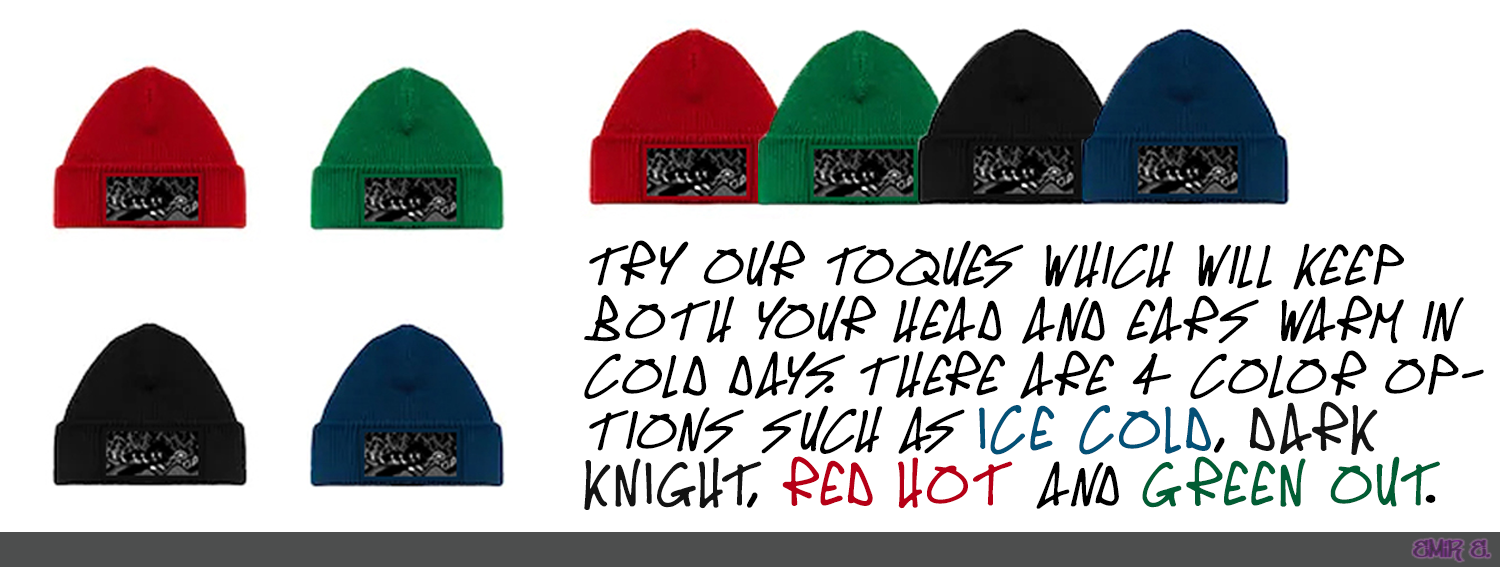
<style>
.page{position:relative;width:1500px;height:567px;background:#ffffff}
.page>*{position:absolute;margin:0}
.t1{font:43px/55px "OldschoolTag-Italic";letter-spacing:0.05em;color:#000000;text-transform:uppercase;scale:1.1 1}
.t2{font:46.9px/55px "OldschoolTag";letter-spacing:0.05em;color:#035177;text-transform:uppercase;scale:1.1 1}
.t3{font:46.9px/55px "OldschoolTag";letter-spacing:0.05em;color:#000000;text-transform:uppercase;scale:1.1 1}
.t4{font:46.9px/55px "OldschoolTag";letter-spacing:0.05em;color:#131313;text-transform:uppercase;scale:1.1 1}
.t5{font:46.9px/55px "OldschoolTag";letter-spacing:0.05em;color:#b60016;text-transform:uppercase;scale:1.1 1}
.t6{font:46.9px/55px "OldschoolTag";letter-spacing:0.05em;color:#015d34;text-transform:uppercase;scale:1.1 1}
</style>
<div class="page">
<p class="t1" style="left:584px;top:240px;width:900px;height:270px">Try our Toques which will keep both your head and ears warm in cold days. There are 4 color options such as <span class="t2">Ice cold</span><span class="t3">, </span><span class="t4">Dark knight</span><span class="t3">, </span><span class="t5">Red hot </span>and <span class="t6">Green Out</span><span class="t3">.</span></p>
</div>
